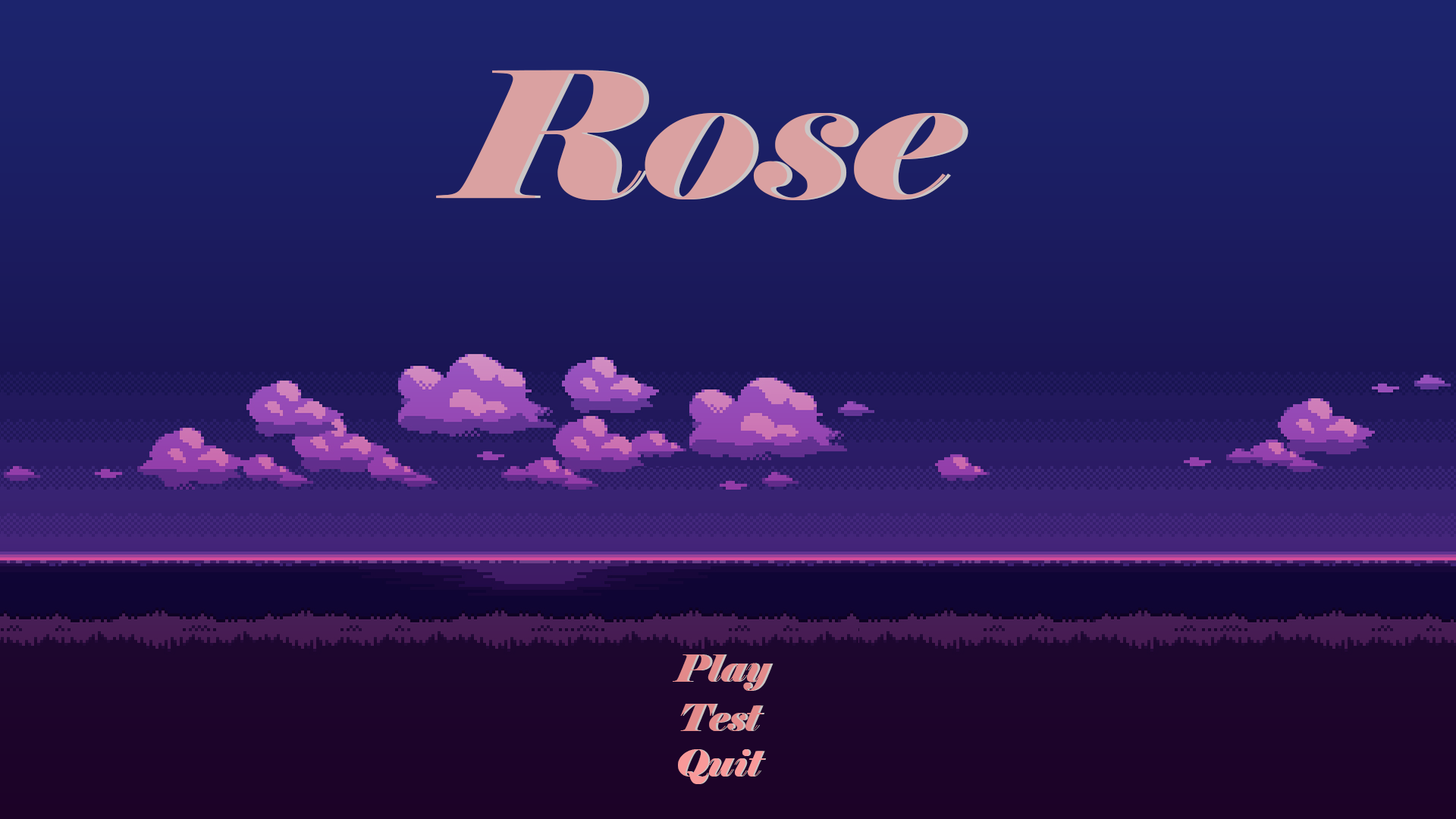
<style>
.page{position:relative;width:1456px;height:819px}
.page>*{position:absolute;margin:0}
.t1{font:175px "Elephant-Italic";color:#daa1a1;scale:1.19 1}
.t2{font:37.9px "Elephant-Italic";color:#e38a8a}
.t3{font:37.9px "Elephant-Italic"}
.t4{font:37.9px "Elephant-Italic";color:#f89999}
</style>
<div class="page">
<p class="t1" style="left:436px;top:70px;width:527px;height:130px">Rose</p>
<p class="t1" style="left:441px;top:70px;width:527px;height:130px">Rose</p>
<p class="t2" style="left:673px;top:654px;width:98px;height:37px">Play</p>
<p class="t2" style="left:675px;top:654px;width:98px;height:37px">Play</p>
<p class="t2" style="left:680px;top:704px;width:82px;height:27px">Test</p>
<p class="t3" style="left:682px;top:704px;width:82px;height:27px">Test</p>
<p class="t4" style="left:678px;top:749px;width:86px;height:35px">Quit</p>
<p class="t4" style="left:679px;top:749px;width:87px;height:35px">Quit</p>
</div>
